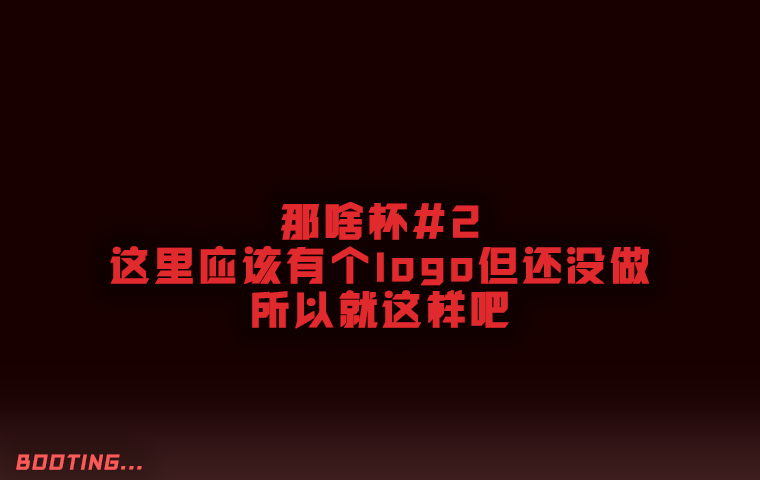
<style>
.page{position:relative;width:760px;height:480px;background:#180000}
.page>*{position:absolute;margin:0}
.t1{font:39px/44px "REEJI-HongGuangGB-Bold";letter-spacing:0.1em;color:#e12a2d;font-weight:bold}
.t2{font:18px "REEJI-HongGuangGB-Bold";letter-spacing:0.1em;color:#ff5a5a;font-weight:bold;font-style:italic}
</style>
<div class="page">
<p class="t1" style="left:110px;top:202px;width:539px;height:127px;text-align:center">那啥杯#2<br>这里应该有个logo但还没做所以就这样吧</p>
<p class="t2" style="left:16px;top:454px;width:126px;height:16px">BOOTING...</p>
</div>
